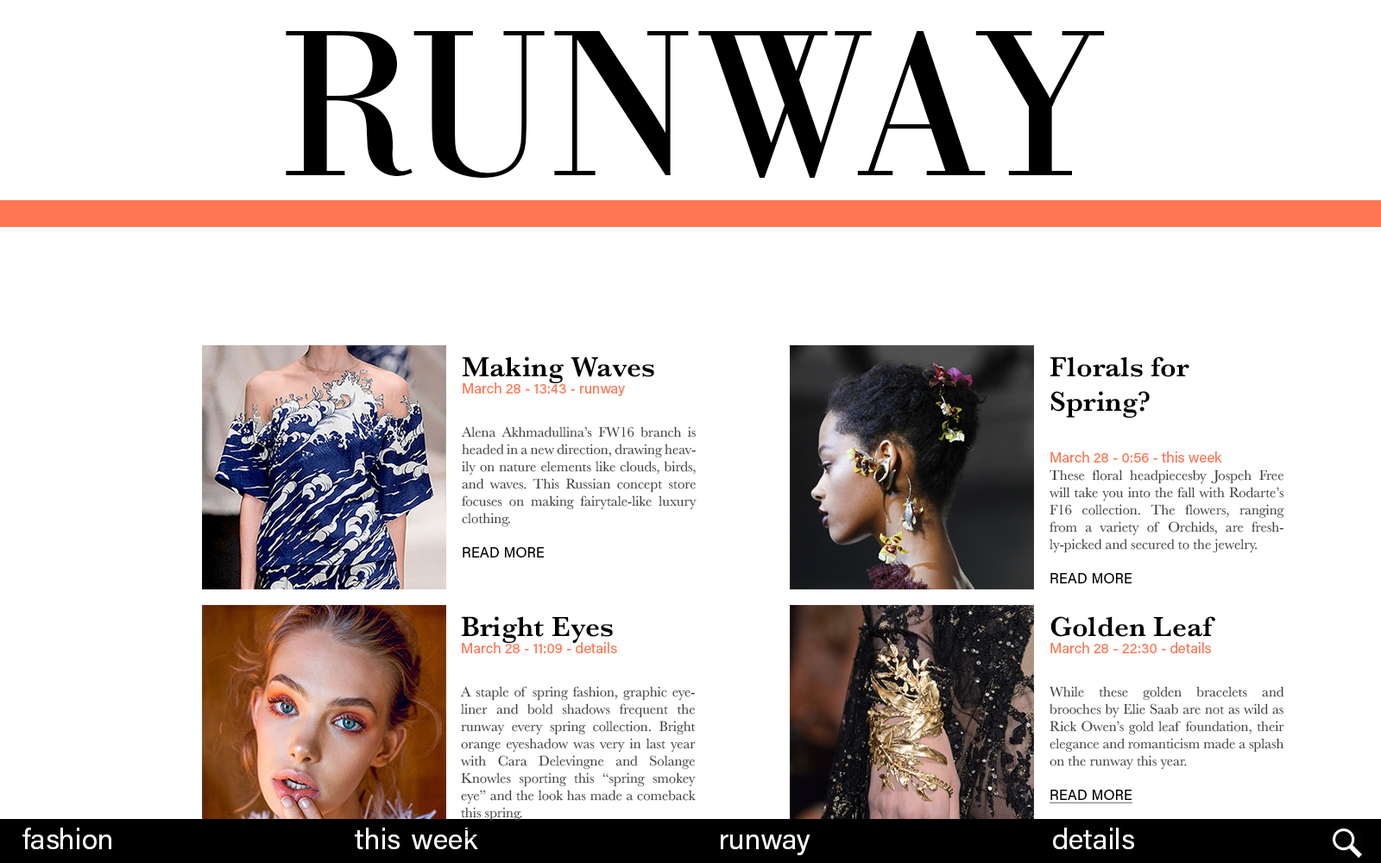
<style>
.page{position:relative;width:1381px;height:863px;background:#ffffff}
.page>*{position:absolute;margin:0}
.t1{font:215.8px "BodoniURW-Reg";color:#000000}
.t2{font:14.4px "Baskerville";color:#3e3d3d}
.t3{font:28.8px "Baskerville-SemiBold";color:#000000}
.t4{font:14.4px "AcuminPro-Regular";color:#ff7752}
.t5{font:14.4px "AcuminPro-Regular";color:#000000}
.t6{font:14.4px "AcuminPro-Regular";color:#000000;text-decoration:underline}
.t7{font:28.8px "AcuminPro-Regular";color:#ffffff}
.t8{font:28.8px "AcuminPro-Regular";color:#000000}
</style>
<div class="page">
<p class="t1" style="left:286px;top:31px;width:819px;height:147px">RUNWAY</p>
<p class="t2" style="left:461px;top:357px;width:236px;height:201px;text-align:justify"><span class="t3">Making Waves<br></span><span class="t4">March 28 - 13:43 - runway<br><br></span>Alena Akhmadullina’s FW16 branch is headed in a new direction, drawing heavily on nature elements like clouds, birds, and waves. This Russian concept store focuses on making fairytale-like luxury clothing. <br><br><span class="t5">READ MORE</span></p>
<p class="t2" style="left:1049px;top:357px;width:236px;height:227px"><span class="t3">Florals for Spring?<br><br></span><span class="t4">March 28 - 0:56 - this week<br></span>These floral headpiecesby Jospeh Free will take you into the fall with Rodarte’s F16 collection. The flowers, ranging from a variety of Orchids, are freshly-picked and secured to the jewelry. <br><br><span class="t5">READ MORE</span></p>
<p class="t2" style="left:460px;top:616px;width:236px;height:222px;text-align:justify"><span class="t3">Bright Eyes<br></span><span class="t4">March 28 - 11:09 - details<br><br></span>A staple of spring fashion, graphic eyeliner and bold shadows frequent the runway every spring collection. Bright orange eyeshadow was very in last year with Cara Delevingne and Solange Knowles sporting this “spring smokey eye” and the look has made a comeback this spring. <br><span class="t6">READ MORE</span></p>
<p class="t2" style="left:1050px;top:616px;width:235px;height:188px;text-align:justify"><span class="t3">Golden Leaf<br></span><span class="t4">March 28 - 22:30 - details<br><br></span>While these golden bracelets and brooches by Elie Saab are not as wild as Rick Owen’s gold leaf foundation, their elegance and romanticism made a splash on the runway this year. <br><br><span class="t6">READ MORE</span></p>
<p class="t7" style="left:22px;top:828px;width:1112px;height:28px">fashion this<span class="t8">-</span>week runway details</p>
</div>
